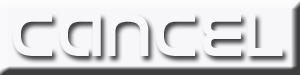
<style>
.page{position:relative;width:300px;height:75px;background:#f7f7fa}
.page>*{position:absolute;margin:0}
.t1{font:59px "DroidLogo-Bold";color:#f7f7fa}
</style>
<div class="page">
<p class="t1" style="left:12px;top:13px;width:271px;height:43px">CANCEL</p>
</div>
